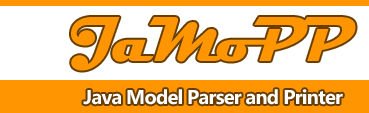
<style>
.page{position:relative;width:369px;height:113px;background:#ffffff}
.page>*{position:absolute;margin:0}
.t1{font:20px "MicrosoftPhagsPa-Bold";letter-spacing:-0.04em;color:#ffffff}
</style>
<div class="page">
<p class="t1" style="left:83px;top:89px;width:260px;height:16px">Java Model Parser and Printer</p>
</div>
